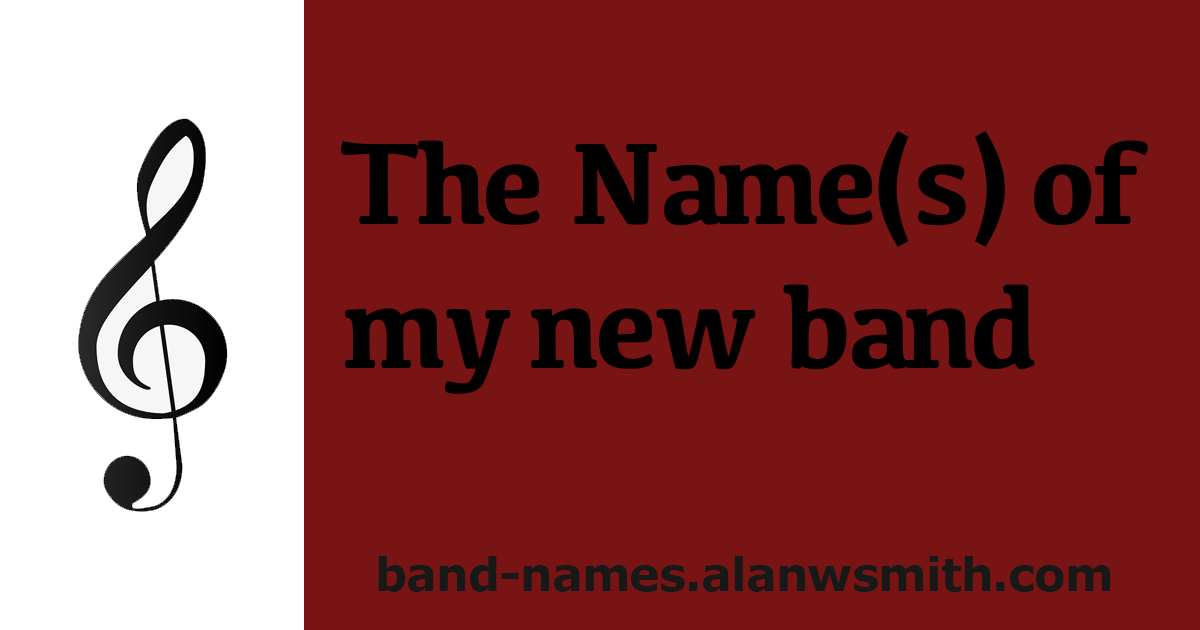
<style>
.page{position:relative;width:1200px;height:630px;background:#781414}
.page>*{position:absolute;margin:0}
.t1{font:120px "Kefa-Bold";letter-spacing:-0.02em;color:#000000}
.t2{font:46px "Verdana-Bold";letter-spacing:-0.02em;color:#171919}
</style>
<div class="page">
<p class="t1" style="left:341px;top:131px;width:807px;height:263px">The Name(s) of <br>my new band</p>
<p class="t2" style="left:378px;top:556px;width:732px;height:36px">band-names.alanwsmith.com</p>
</div>
